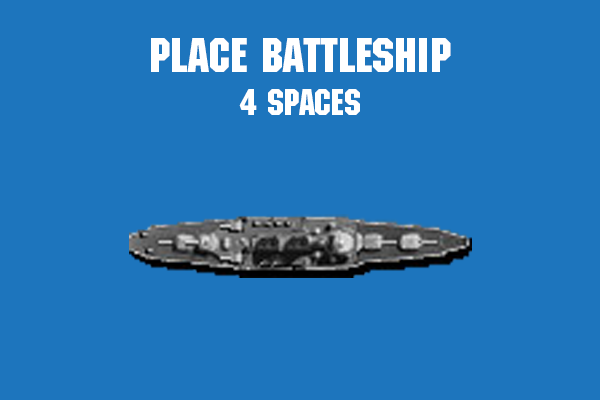
<style>
.page{position:relative;width:600px;height:400px;background:#1d75bd}
.page>*{position:absolute;margin:0}
.t1{font:48px "MachineStd";color:#ffffff}
.t2{font:36px "MachineStd";color:#ffffff}
</style>
<div class="page">
<p class="t1" style="left:151px;top:38px;width:300px;height:77px;text-align:center">Place BAttleShip<br><span class="t2">4 spaces</span></p>
</div>
